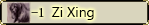
<style>
.page{position:relative;width:149px;height:25px;background:#d9d5bd}
.page>*{position:absolute;margin:0}
.t1{font:14px "LaoUI";color:#000000}
</style>
<div class="page">
<p class="t1" style="left:51px;top:7px;width:43px;height:13px">Zi Xing</p>
</div>
